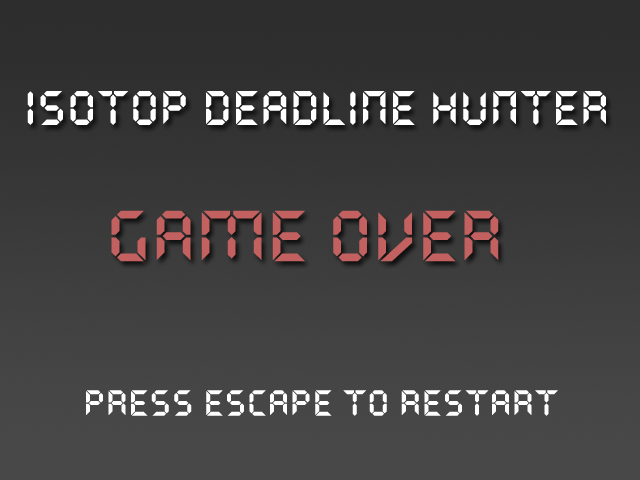
<style>
.page{position:relative;width:640px;height:480px}
.page>*{position:absolute;margin:0}
.t1{font:48px "QuartzMS";color:#ffffff}
.t2{font:72px "QuartzMS";color:#c36161}
.t3{font:36px "QuartzMS";color:#ffffff}
</style>
<div class="page">
<p class="t1" style="left:27px;top:91px;width:579px;height:34px">ISOTOP DEADLINE HUNTER</p>
<p class="t2" style="left:111px;top:210px;width:388px;height:52px">GAME OVER</p>
<p class="t3" style="left:86px;top:390px;width:472px;height:26px">PRESS ESCAPE TO RESTART</p>
</div>
